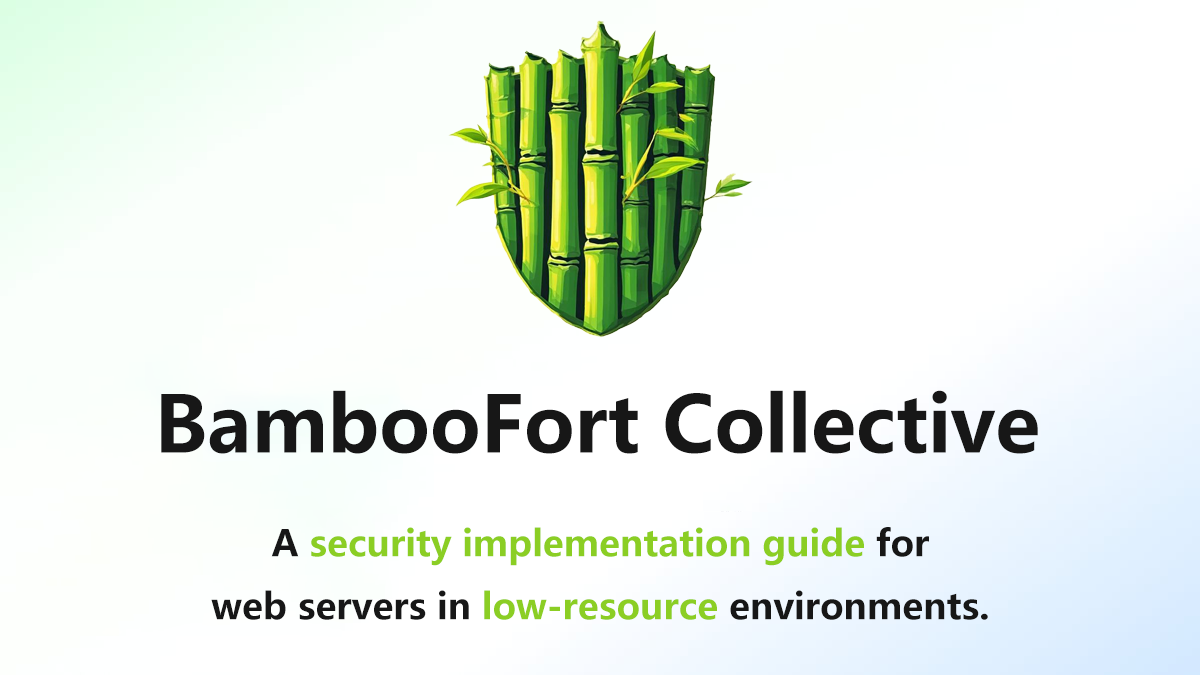
<style>
.page{position:relative;width:1200px;height:675px}
.page>*{position:absolute;margin:0}
.t1{font:77.3px "MicrosoftYaHeiUI-Bold";color:#171717}
.t2{font:36px "MicrosoftYaHeiUI-Bold";color:#8bce24}
.t3{font:36px "MicrosoftYaHeiUI-Bold";color:#171717}
</style>
<div class="page">
<p class="t1" style="left:161px;top:390px;width:877px;height:64px">BambooFort Collective</p>
<p class="t2" style="left:211px;top:527px;width:777px;height:93px;text-align:center"><span class="t3">A </span>security implementation guide<span class="t3"> for<br>web servers in </span>low-resource<span class="t3"> environments.</span></p>
</div>
